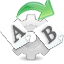
<style>
.page{position:relative;width:64px;height:64px;background:#ffffff}
.page>*{position:absolute;margin:0}
.t1{font:20px "Georgia";color:#555555;font-weight:bold;font-style:italic}
</style>
<div class="page">
<p class="t1" style="left:12px;top:25px;width:14px;height:18px;rotate:-40deg;opacity:0.9">A</p>
<p class="t1" style="left:41px;top:25px;width:16px;height:19px;rotate:-40deg;opacity:0.9">B</p>
</div>
